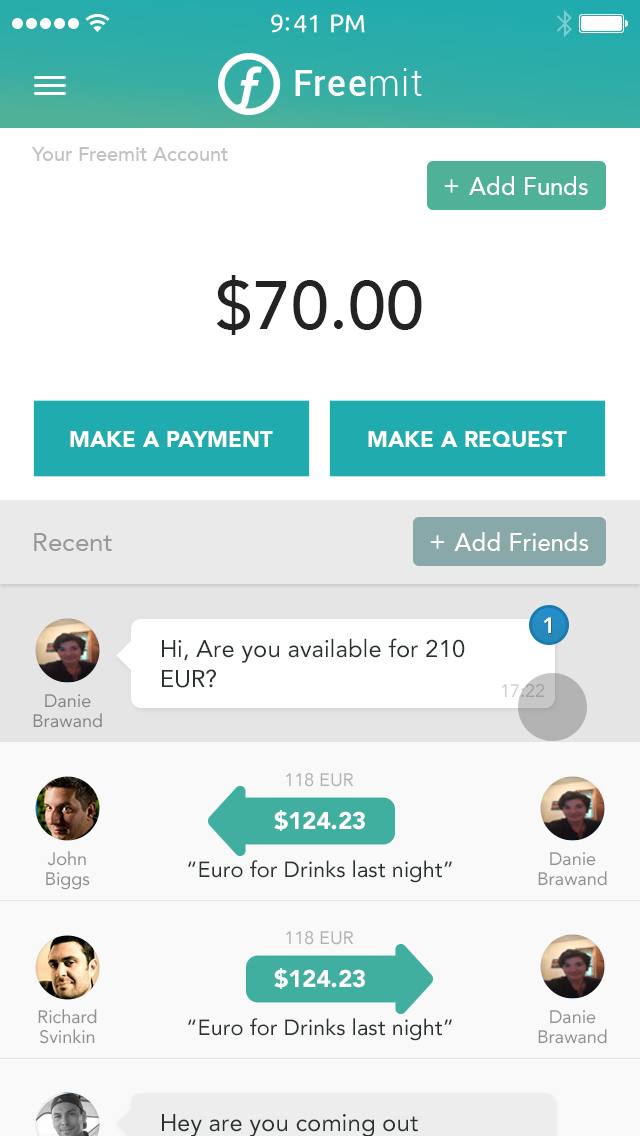
<style>
.page{position:relative;width:640px;height:1136px;background:#ffffff}
.page>*{position:absolute;margin:0}
.t1{font:25px "Ubuntu";color:#ffffff}
.t2{font:20px "Avenir-Medium";color:#c2c2c2}
.t3{font:24px "Avenir-Medium";color:#ffffff}
.t4{font:68px "Avenir-Medium";color:#222325}
.t5{font:22px "Avenir-Black";color:#ffffff;text-transform:uppercase}
.t6{font:26px "Avenir-Roman";color:#999999}
.t7{font:22px "Avenir-Heavy";color:#ffffff}
.t8{font:24px/30px "Avenir-Roman";color:#2a3231}
.t9{font:18px "Avenir-Roman"}
.t10{font:18px/20px "Avenir-Roman";color:#868686}
.t11{font:18px "Avenir-Roman";color:#b0b2b2}
.t12{font:24px "Avenir-Black";color:#ffffff}
.t13{font:18px/20px "Avenir-Roman";color:#919191}
.t14{font:22px "Avenir-Roman";color:#2a3231}
</style>
<div class="page">
<p class="t1" style="left:271px;top:14px;width:94px;height:19px">9:41 PM</p>
<p class="t2" style="left:31px;top:147px;width:197px;height:14px">Your Freemit Account</p>
<p class="t3" style="left:469px;top:176px;width:119px;height:19px">Add Funds</p>
<p class="t4" style="left:216px;top:275px;width:206px;height:60px">$70.00</p>
<p class="t5" style="left:70px;top:431px;width:203px;height:16px">Make a Payment</p>
<p class="t5" style="left:368px;top:431px;width:199px;height:16px">Make a request</p>
<p class="t6" style="left:34px;top:533px;width:78px;height:18px">Recent</p>
<p class="t3" style="left:454px;top:532px;width:135px;height:19px">Add Friends</p>
<p class="t7" style="left:543px;top:617px;width:8px;height:16px">1</p>
<p class="t7" style="left:543px;top:617px;width:8px;height:16px">1</p>
<p class="t8" style="left:162px;top:638px;width:303px;height:50px">Hi, Are you available for 210 EUR?</p>
<p class="t8" style="left:162px;top:638px;width:303px;height:50px">Hi, Are you available for 210 EUR?</p>
<p class="t9" style="left:501px;top:684px;width:43px;height:13px">17:22</p>
<p class="t9" style="left:501px;top:684px;width:43px;height:13px">17:22</p>
<p class="t10" style="left:33px;top:694px;width:69px;height:34px;text-align:center">Danie Brawand</p>
<p class="t10" style="left:33px;top:694px;width:69px;height:34px;text-align:center">Danie Brawand</p>
<p class="t11" style="left:286px;top:773px;width:67px;height:14px">118 EUR</p>
<p class="t12" style="left:274px;top:810px;width:91px;height:21px">$124.23</p>
<p class="t13" style="left:46px;top:851px;width:44px;height:39px;text-align:center">John Biggs</p>
<p class="t13" style="left:538px;top:852px;width:69px;height:34px;text-align:center">Danie Brawand</p>
<p class="t14" style="left:188px;top:860px;width:264px;height:23px">“Euro for Drinks last night”</p>
<p class="t11" style="left:286px;top:931px;width:67px;height:14px">118 EUR</p>
<p class="t12" style="left:274px;top:968px;width:91px;height:21px">$124.23</p>
<p class="t13" style="left:38px;top:1009px;width:59px;height:35px;text-align:center">Richard Svinkin</p>
<p class="t13" style="left:538px;top:1010px;width:69px;height:34px;text-align:center">Danie Brawand</p>
<p class="t14" style="left:188px;top:1018px;width:264px;height:23px">“Euro for Drinks last night”</p>
</div>
